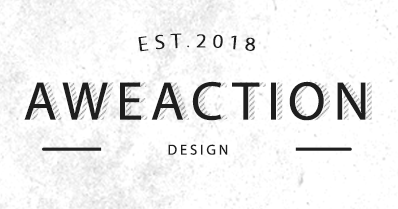
<style>
.page{position:relative;width:398px;height:209px;background:#ffffff}
.page>*{position:absolute;margin:0}
.t1{font:20.5px "MyriadPro-Regular";letter-spacing:0.26em;color:#1e1e1e;text-transform:uppercase}
.t2{font:54.9px "MyriadPro-Regular";letter-spacing:0.12em;color:#1e1e1e;text-transform:uppercase}
.t3{font:14.5px "MyriadPro-Regular";letter-spacing:0.18em;color:#1e1e1e;text-transform:uppercase}
</style>
<div class="page">
<p class="t1" style="left:138px;top:33px;width:117px;height:19px">Est.2018</p>
<p class="t2" style="left:24px;top:81px;width:342px;height:40px">AWEACTION</p>
<p class="t3" style="left:168px;top:144px;width:60px;height:11px">Design</p>
</div>
